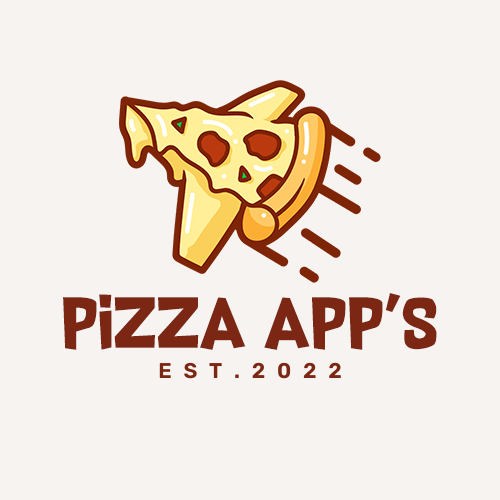
<style>
.page{position:relative;width:500px;height:500px;background:#f6f3f0}
.page>*{position:absolute;margin:0}
.t1{font:58.7px "SupersonicRocketship";letter-spacing:0.01em;color:#7c2714;text-transform:uppercase;scale:1.2 1}
</style>
<div class="page">
<p class="t1" style="left:63px;top:293px;width:374px;height:57px">Pizza App's</p>
</div>
